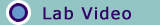
<style>
.page{position:relative;width:160px;height:25px;background:#94c5c5}
.page>*{position:absolute;margin:0}
.t1{font:16px "Verdana";letter-spacing:0.055em;color:#330066;font-weight:bold}
</style>
<div class="page">
<p class="t1" style="left:43px;top:6px;width:88px;height:14px">Lab Video</p>
</div>
